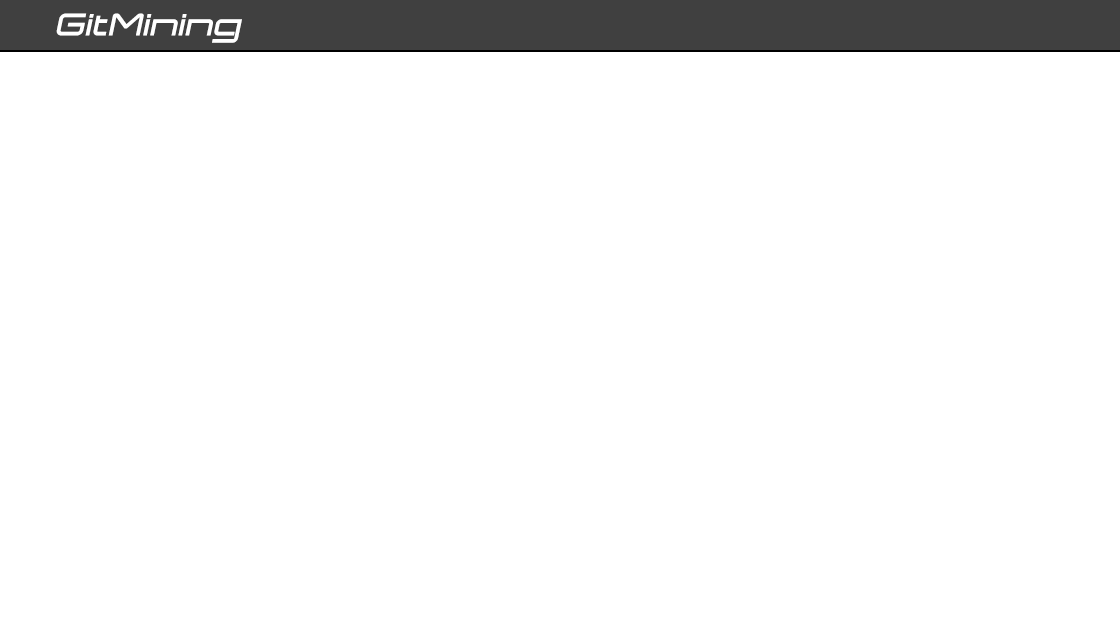
<style>
.page{position:relative;width:1120px;height:630px;background:#ffffff}
.page>*{position:absolute;margin:0}
.t1{font:30px "Expansiva-BoldItalic";color:#ffffff;font-weight:bold}
</style>
<div class="page">
<p class="t1" style="left:56px;top:13px;width:186px;height:30px">GitMining</p>
</div>
